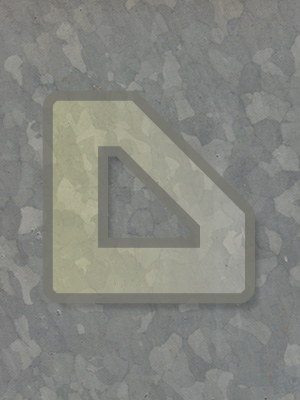
<style>
.page{position:relative;width:300px;height:400px}
.page>*{position:absolute;margin:0}
.t1{font:300px "5thAgent";color:#a0a08f;font-weight:bold}
</style>
<div class="page">
<p class="t1" style="left:52px;top:100px;width:193px;height:194px">D</p>
</div>
